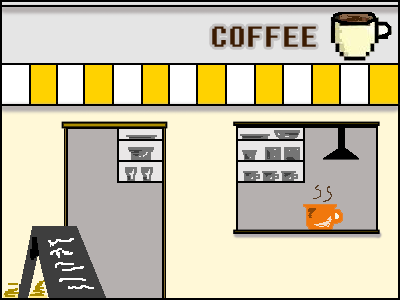
<style>
.page{position:relative;width:400px;height:300px;background:#fff8d7}
.page>*{position:absolute;margin:0}
.t1{font:36px "Fixedsys";color:#3b1b02}
</style>
<div class="page">
<p class="t1" style="left:212px;top:26px;width:104px;height:21px">COFFEE</p>
</div>
